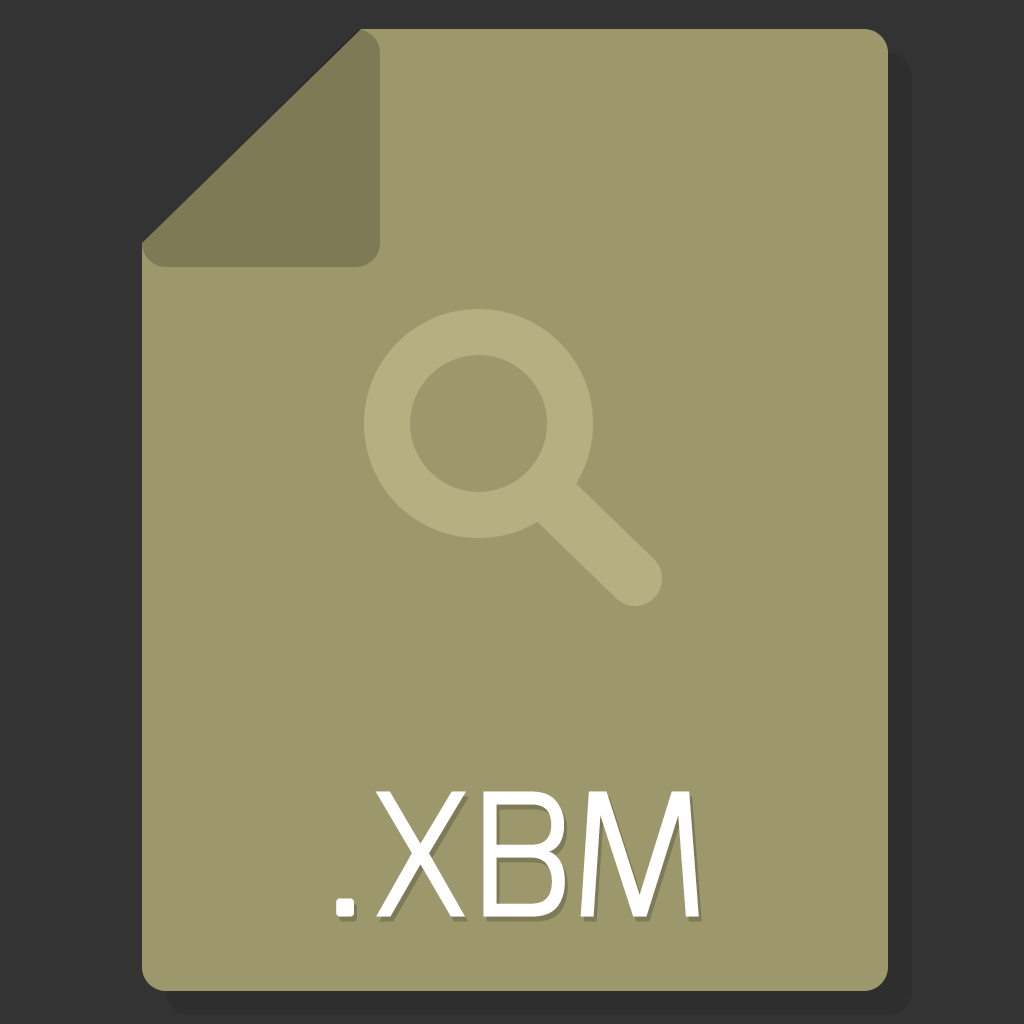
<style>
.page{position:relative;width:1024px;height:1024px;background:#9d986c}
.page>*{position:absolute;margin:0}
.t1{font:170.3px "Exo-Regular";color:#ffffff}
</style>
<div class="page">
<p class="t1" style="left:336px;top:791px;width:363px;height:126px">.XBM</p>
</div>
